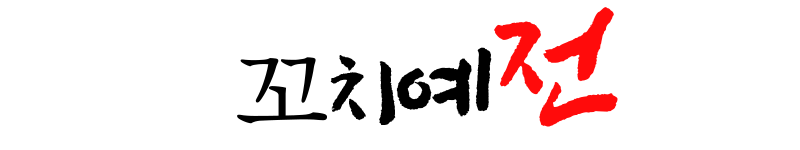
<style>
.page{position:relative;width:800px;height:150px;background:#ffffff}
.page>*{position:absolute;margin:0}
.t1{font:105.8px "JejuMyeongjo";color:#000000}
.t2{font:90px "SangSangRockOTF";color:#000000}
.t3{font:110px "SangSangRockOTF";color:#000000}
.t4{font:148.2px "SangSangRockOTF";color:#ff0b0b}
</style>
<div class="page">
<p class="t1" style="left:237px;top:7px;width:381px;height:120px">꼬<span class="t2">치</span><span class="t3">예</span><span class="t4">전</span></p>
</div>
